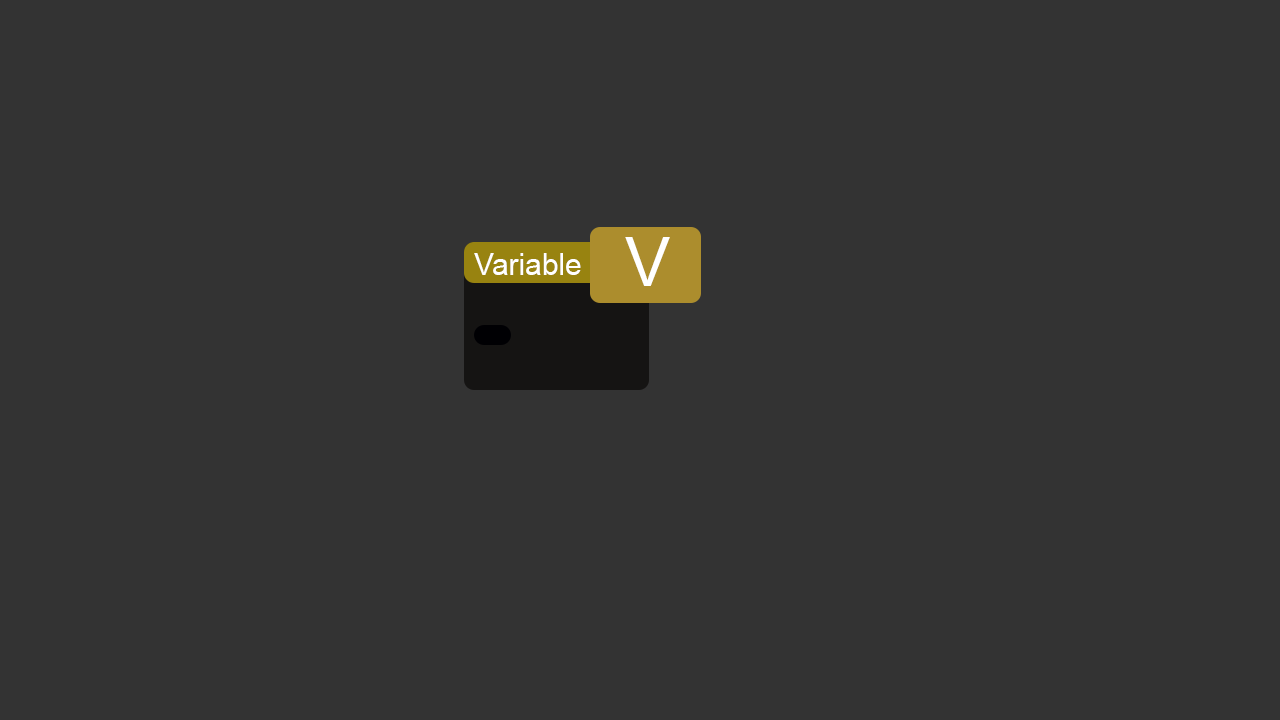
<style>
.page{position:relative;width:1280px;height:720px;background:#333333}
.page>*{position:absolute;margin:0}
.t1{font:68.5px "ArialMT";color:#ffffff}
.t2{font:30px "ArialMT";color:#ffffff}
</style>
<div class="page">
<p class="t1" style="left:625px;top:237px;width:45px;height:49px">V</p>
<p class="t2" style="left:474px;top:253px;width:107px;height:22px">Variable</p>
</div>
